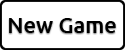
<style>
.page{position:relative;width:125px;height:50px;background:#ffffff}
.page>*{position:absolute;margin:0}
.t1{font:22px "Ubuntu-Medium";color:#000000}
</style>
<div class="page">
<p class="t1" style="left:9px;top:18px;width:107px;height:15px">New Game</p>
</div>
